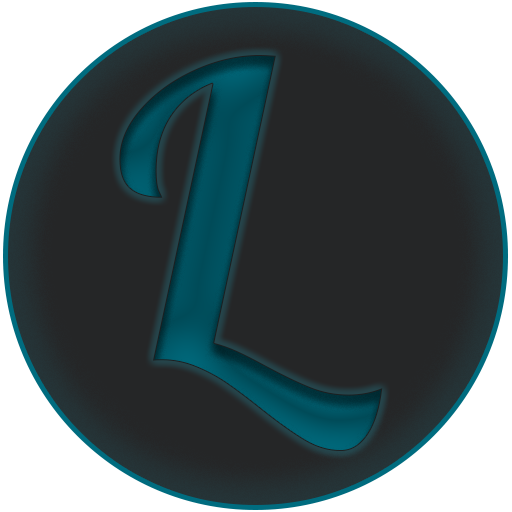
<style>
.page{position:relative;width:512px;height:512px;background:#252627}
.page>*{position:absolute;margin:0}
.t1{font:400px "Lobster-Regular";color:#006c7f}
</style>
<div class="page">
<p class="t1" style="left:119px;top:55px;width:264px;height:396px">L</p>
</div>
